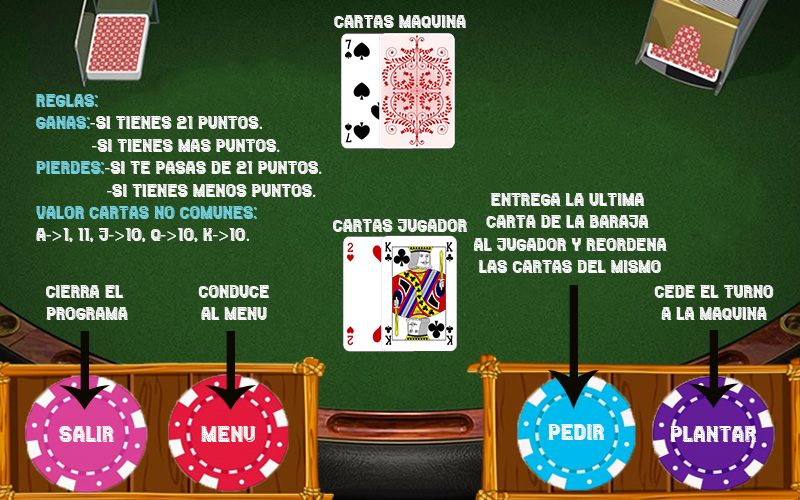
<style>
.page{position:relative;width:800px;height:500px}
.page>*{position:absolute;margin:0}
.t1{font:18.7px "CasinoShadow-Regular";color:#ffffff}
.t2{font:18.7px "CasinoShadow-Regular";color:#77d2e0}
.t3{font:18.7px "MyriadPro-Regular";color:#ffffff}
.t4{font:24px "CasinoShadow-Regular";color:#ffffff}
</style>
<div class="page">
<p class="t1" style="left:334px;top:15px;width:132px;height:13px">cartas maquina</p>
<p class="t1" style="left:36px;top:94px;width:286px;height:148px"><span class="t2">Reglas:<br>ganas:</span><span class="t3">-</span>Si tienes 21 puntos<span class="t3">.<br>              -</span>si tienes mas puntos<span class="t3">.<br></span><span class="t2">pierdes:</span><span class="t3">-</span>si te pasas de 21 puntos<span class="t3">.<br>              -</span>Si tienes menos puntos<span class="t3">.<br></span><span class="t2">valor cartas no comunes:</span> <br>a<span class="t3">-&gt;</span>1, 11, j<span class="t3">-&gt;</span>10, q<span class="t3">-&gt;</span>10, k<span class="t3">-&gt;</span>10<span class="t3">.</span></p>
<p class="t1" style="left:473px;top:193px;width:194px;height:80px;text-align:center">entrega la ultima <br>carta de la baraja <br>al jugador y reordena<br>las cartas del mismo</p>
<p class="t1" style="left:333px;top:219px;width:135px;height:13px">cartas jugador</p>
<p class="t1" style="left:46px;top:285px;width:82px;height:35px;text-align:center">Cierra el <br>programa</p>
<p class="t1" style="left:198px;top:285px;width:72px;height:35px;text-align:center">Conduce<br>al menu</p>
<p class="t1" style="left:654px;top:285px;width:120px;height:35px;text-align:center">cede el turno<br>a la maquina</p>
<p class="t4" style="left:548px;top:424px;width:57px;height:16px">pedir</p>
<p class="t4" style="left:59px;top:426px;width:55px;height:16px">Salir</p>
<p class="t4" style="left:201px;top:426px;width:55px;height:16px">menu</p>
<p class="t4" style="left:670px;top:426px;width:87px;height:16px">Plantar</p>
</div>
